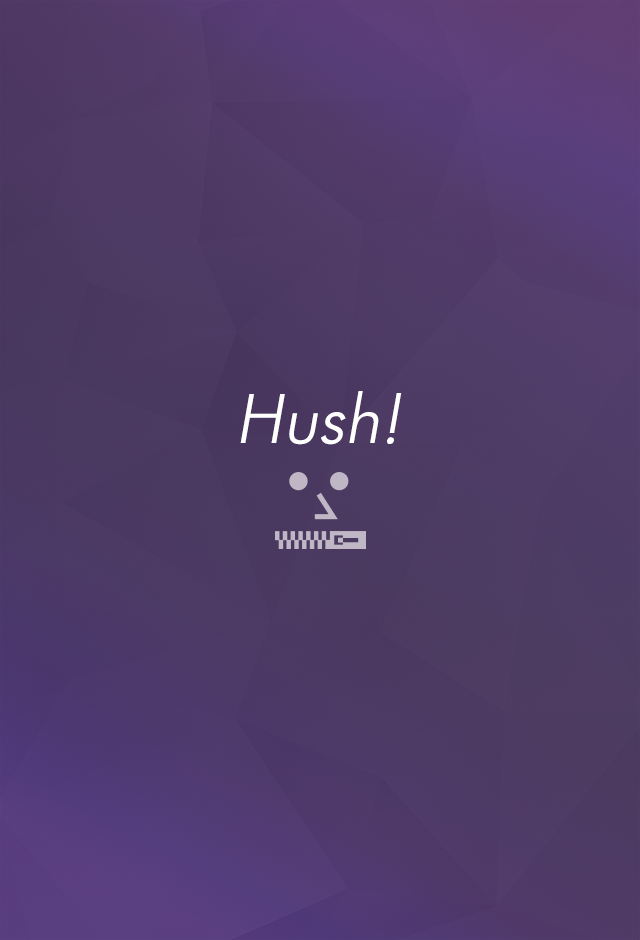
<style>
.page{position:relative;width:640px;height:940px}
.page>*{position:absolute;margin:0}
.t1{font:68px "FuturiLightRegularSWFTE";color:#ffffff;font-style:italic}
</style>
<div class="page">
<p class="t1" style="left:240px;top:391px;width:162px;height:54px">Hush!</p>
</div>
